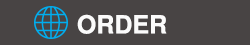
<style>
.page{position:relative;width:250px;height:45px;background:#484444}
.page>*{position:absolute;margin:0}
.t1{font:25px "TeXGyreHeros-Bold";color:#fbfbfb}
</style>
<div class="page">
<p class="t1" style="left:77px;top:14px;width:90px;height:20px">ORDER</p>
</div>
